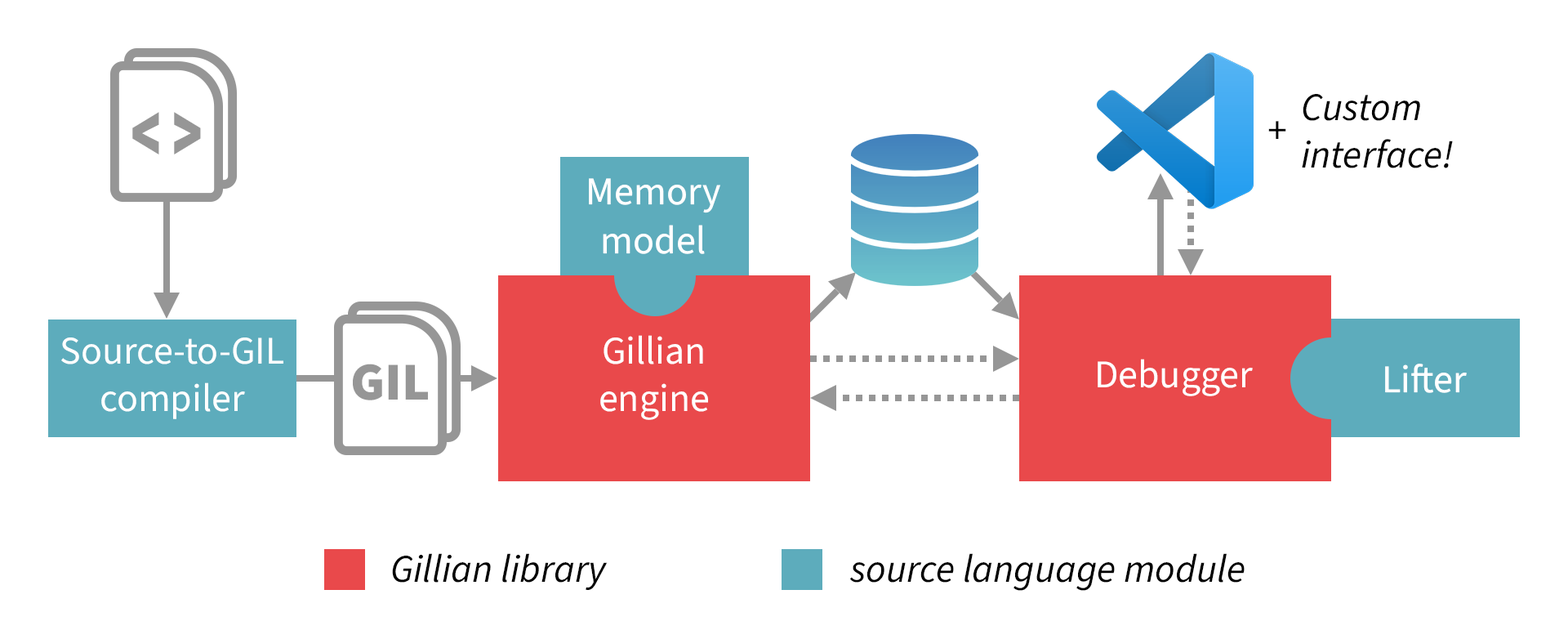
<style>
.page{position:relative;width:1568px;height:639px;background:#ffffff}
.page>*{position:absolute;margin:0}
.t1{font:39.2px "SourceSansItalic-Italic";color:#000000}
.t2{font:88.2px "SourceSansRoman-Black";color:#969696;scale:0.63 1}
.t3{font:39.2px "SourceSansRoman-Regular";color:#000000}
.t4{font:39.2px/49px "SourceSansRoman-Regular";color:#ffffff}
.t5{font:39.2px "SourceSansRoman-Regular";color:#ffffff}
.t6{font:53.5px "SourceSansRoman-Black";color:#969696}
</style>
<div class="page">
<p class="t1" style="left:1302px;top:94px;width:151px;height:74px">Custom<br>interface!</p>
<p class="t2" style="left:132px;top:112px;width:69px;height:42px">&lt; &gt;</p>
<p class="t3" style="left:1268px;top:121px;width:18px;height:18px">+</p>
<p class="t4" style="left:589px;top:178px;width:131px;height:76px;text-align:center">Memory<br>model</p>
<p class="t5" style="left:61px;top:337px;width:222px;height:82px;text-align:center">Source-to-GIL<br>compiler</p>
<p class="t5" style="left:600px;top:335px;width:108px;height:85px;text-align:center">Gillian<br>engine</p>
<p class="t6" style="left:353px;top:363px;width:75px;height:37px">GIL</p>
<p class="t5" style="left:1098px;top:359px;width:155px;height:37px">Debugger</p>
<p class="t5" style="left:1385px;top:363px;width:82px;height:30px">Lifter</p>
<p class="t1" style="left:392px;top:553px;width:216px;height:37px">Gillian library</p>
<p class="t1" style="left:850px;top:553px;width:395px;height:37px">source language module</p>
</div>
